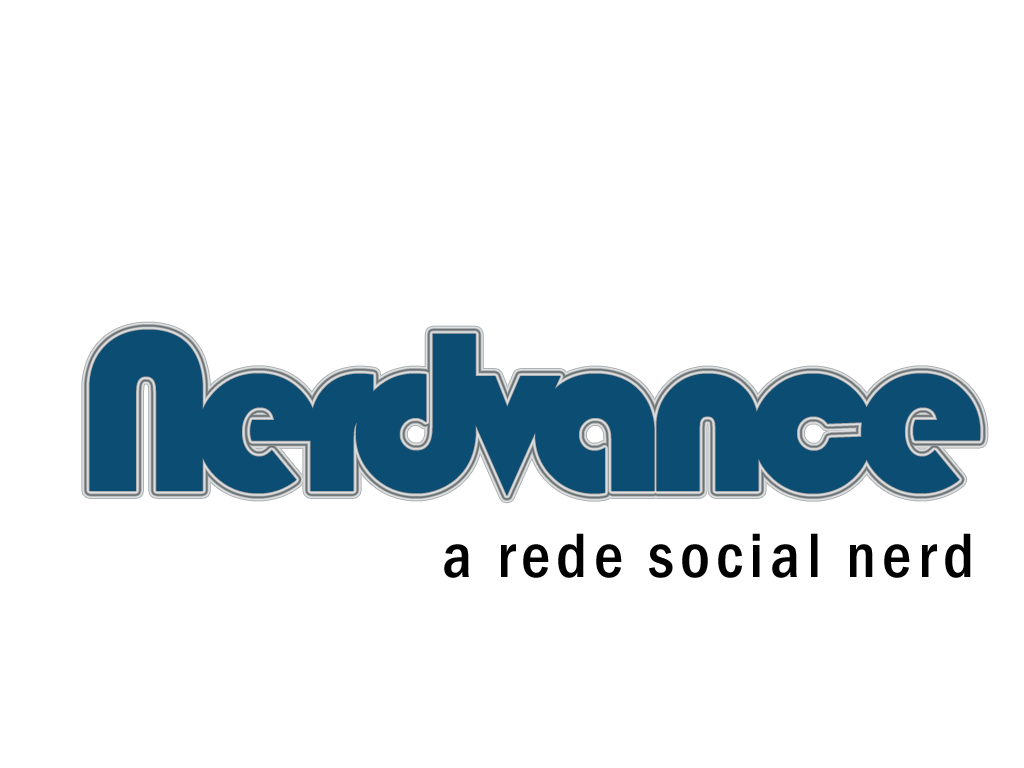
<style>
.page{position:relative;width:1024px;height:768px;background:#ffffff}
.page>*{position:absolute;margin:0}
.t1{font:236px "Bauhaus93";letter-spacing:-0.1em;color:#0b4d73}
.t2{font:65px "FranklinGothic-MediumCond";letter-spacing:0.1em;color:#000000}
</style>
<div class="page">
<p class="t1" style="left:89px;top:329px;width:892px;height:167px">Nerdvance</p>
<p class="t2" style="left:444px;top:533px;width:527px;height:45px">a rede social nerd</p>
</div>
